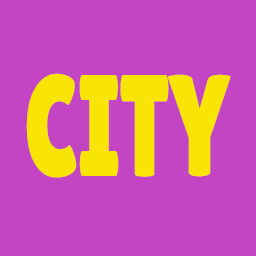
<style>
.page{position:relative;width:256px;height:256px;background:#c445c3}
.page>*{position:absolute;margin:0}
.t1{font:144px "LilitaOne";color:#f8e405;scale:0.68 1}
</style>
<div class="page">
<p class="t1" style="left:26px;top:73px;width:205px;height:105px">CITY</p>
</div>
